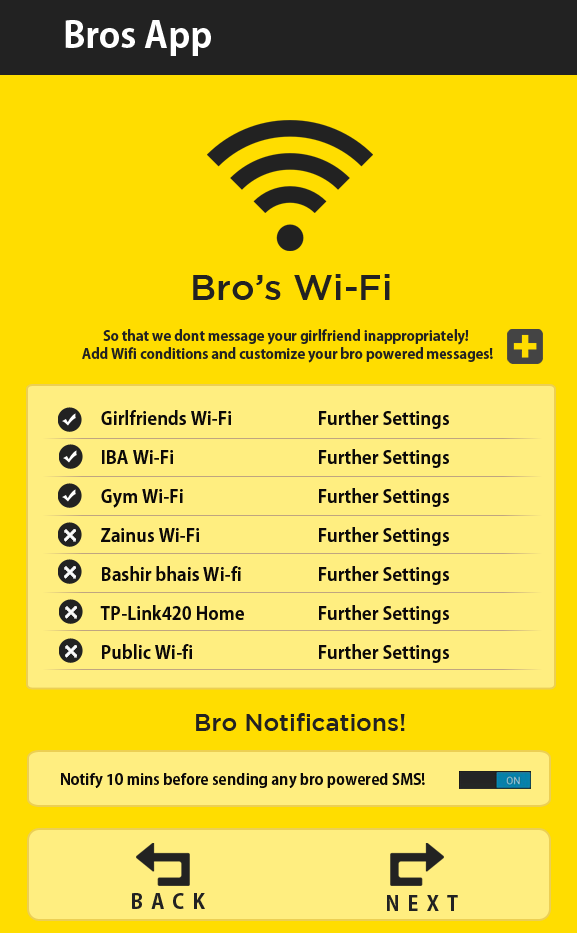
<style>
.page{position:relative;width:577px;height:933px;background:#ffdd00}
.page>*{position:absolute;margin:0}
.t1{font:36px "AdobeGothicStd-Bold";color:#ffffff}
.t2{font:36px "GothamMedium";color:#222222}
.t3{font:14px/18px "AdobeGothicStd-Bold";color:#222222}
.t4{font:18px/39px "AdobeGothicStd-Bold";color:#0c0908}
.t5{font:24px "GothamMedium";color:#222222}
.t6{font:15px "AdobeGothicStd-Bold";color:#0c0908}
.t7{font:20px "AdobeGothicStd-Bold";letter-spacing:0.4em;color:#222222}
</style>
<div class="page">
<p class="t1" style="left:65px;top:20px;width:146px;height:36px">Bros App</p>
<p class="t2" style="left:193px;top:274px;width:197px;height:26px">Bro’s Wi-Fi</p>
<p class="t3" style="left:82px;top:329px;width:411px;height:34px;text-align:center">So that we dont message your girlfriend inappropriately! <br>Add Wifi conditions and customize your bro powered messages!</p>
<p class="t4" style="left:100px;top:410px;width:144px;height:249px">Girlfriends Wi-Fi<br>IBA Wi-Fi<br>Gym Wi-Fi<br>Zainus Wi-Fi<br>Bashir bhais Wi-fi<br>TP-Link420 Home<br>Public Wi-fi</p>
<p class="t4" style="left:319px;top:410px;width:130px;height:253px">Further Settings<br>Further Settings<br>Further Settings<br>Further Settings<br>Further Settings<br>Further Settings<br>Further Settings</p>
<p class="t5" style="left:196px;top:713px;width:209px;height:18px">Bro Notifications!</p>
<p class="t6" style="left:61px;top:773px;width:364px;height:15px">Notify 10 mins before sending any bro powered SMS!</p>
<p class="t7" style="left:132px;top:893px;width:73px;height:16px">BACK</p>
<p class="t7" style="left:387px;top:895px;width:71px;height:16px">NEXT</p>
</div>
